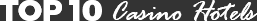
<style>
.page{position:relative;width:257px;height:21px;background:#333333}
.page>*{position:absolute;margin:0}
.t1{font:30px "Montserrat-ExtraBold";color:#ffffff}
.t2{font:30px "RageItalic";color:#ffffff}
</style>
<div class="page">
<p class="t1" style="left:0px;top:0px;width:102px;height:21px">TOP 10</p>
<p class="t2" style="left:113px;top:0px;width:144px;height:21px">Casino Hotels</p>
</div>
